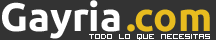
<style>
.page{position:relative;width:216px;height:40px;background:#333333}
.page>*{position:absolute;margin:0}
.t1{font:40px "Ubuntu-Bold";color:#ffffff}
.t2{font:40px "Ubuntu-Bold";color:#e8bc1f}
.t3{font:10px "VisitorTT1BRK";color:#ffffff}
</style>
<div class="page">
<p class="t1" style="left:2px;top:0px;width:118px;height:39px">Gayria</p>
<p class="t2" style="left:127px;top:9px;width:83px;height:23px">.com</p>
<p class="t3" style="left:89px;top:34px;width:121px;height:6px">todo lo que necesitas</p>
</div>
